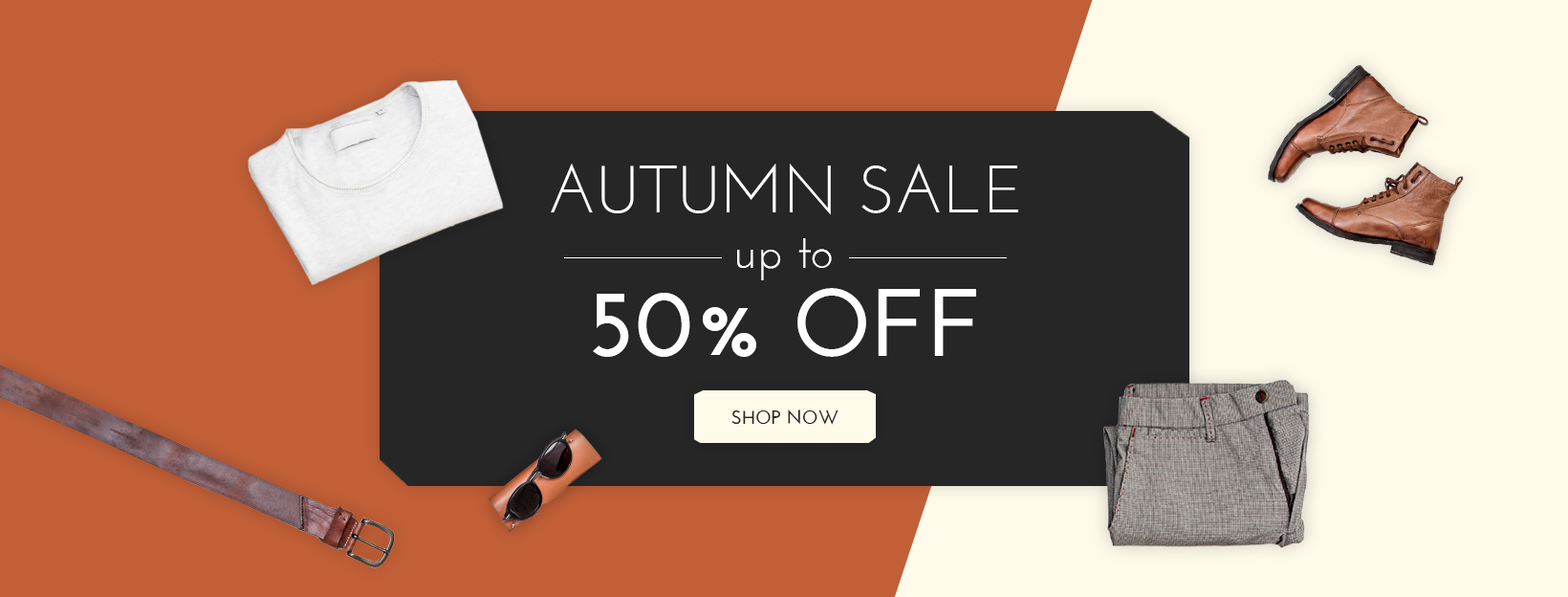
<style>
.page{position:relative;width:1568px;height:597px;background:#c25f37}
.page>*{position:absolute;margin:0}
.t1{font:66.9px "JosefinSans";color:#ffffff;text-transform:uppercase}
.t2{font:66.9px "JosefinSans";color:#ffffff}
.t3{font:47.8px "JosefinSans";color:#ffffff}
.t4{font:95.6px "JosefinSans-Bold";color:#ffffff}
.t5{font:19.1px "JosefinSans-Bold";color:#262626}
</style>
<div class="page">
<p class="t1" style="left:551px;top:163px;width:467px;height:52px">Autumn<span class="t2"> SALE</span></p>
<p class="t3" style="left:737px;top:238px;width:95px;height:42px">up to</p>
<p class="t4" style="left:593px;top:288px;width:383px;height:69px">50% OFF</p>
<p class="t5" style="left:731px;top:409px;width:107px;height:16px">SHOP NOW</p>
</div>
